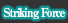
<style>
.page{position:relative;width:68px;height:23px;background:#333333}
.page>*{position:absolute;margin:0}
.t1{font:12px "RyuminPro-ExBold";letter-spacing:-0.06em;color:#ffffff;scale:0.9 1}
</style>
<div class="page">
<p class="t1" style="left:3px;top:7px;width:62px;height:12px">Striking Force</p>
</div>
